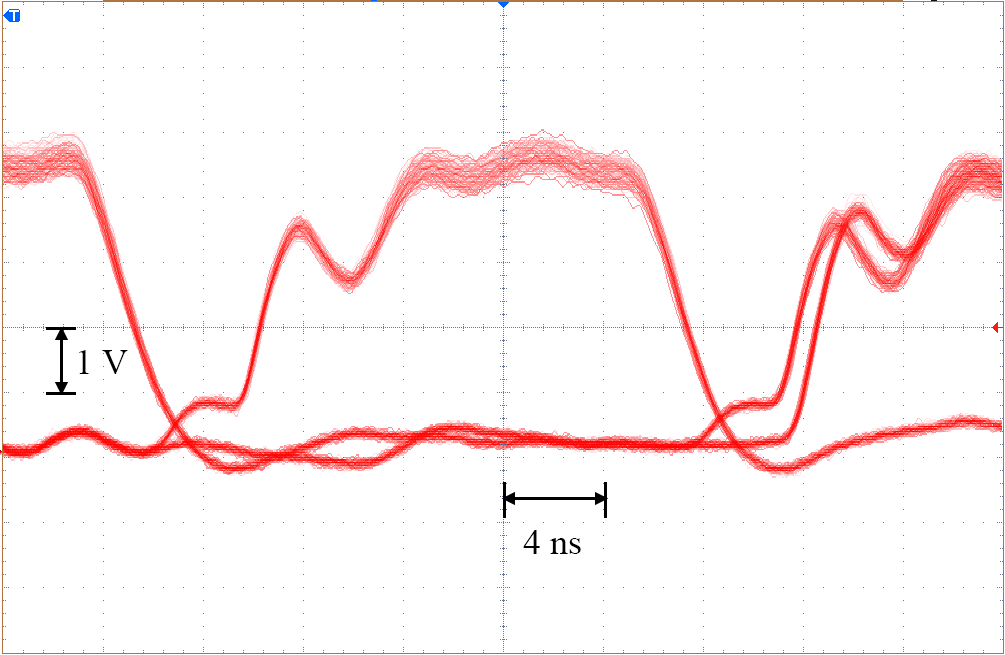
<style>
.page{position:relative;width:1005px;height:655px;background:#ffffff}
.page>*{position:absolute;margin:0}
.t1{font:36px "TimesNewRomanPSMT";color:#000000}
</style>
<div class="page">
<p class="t1" style="left:79px;top:350px;width:49px;height:24px">1 V</p>
<p class="t1" style="left:523px;top:530px;width:58px;height:24px">4 ns</p>
</div>
